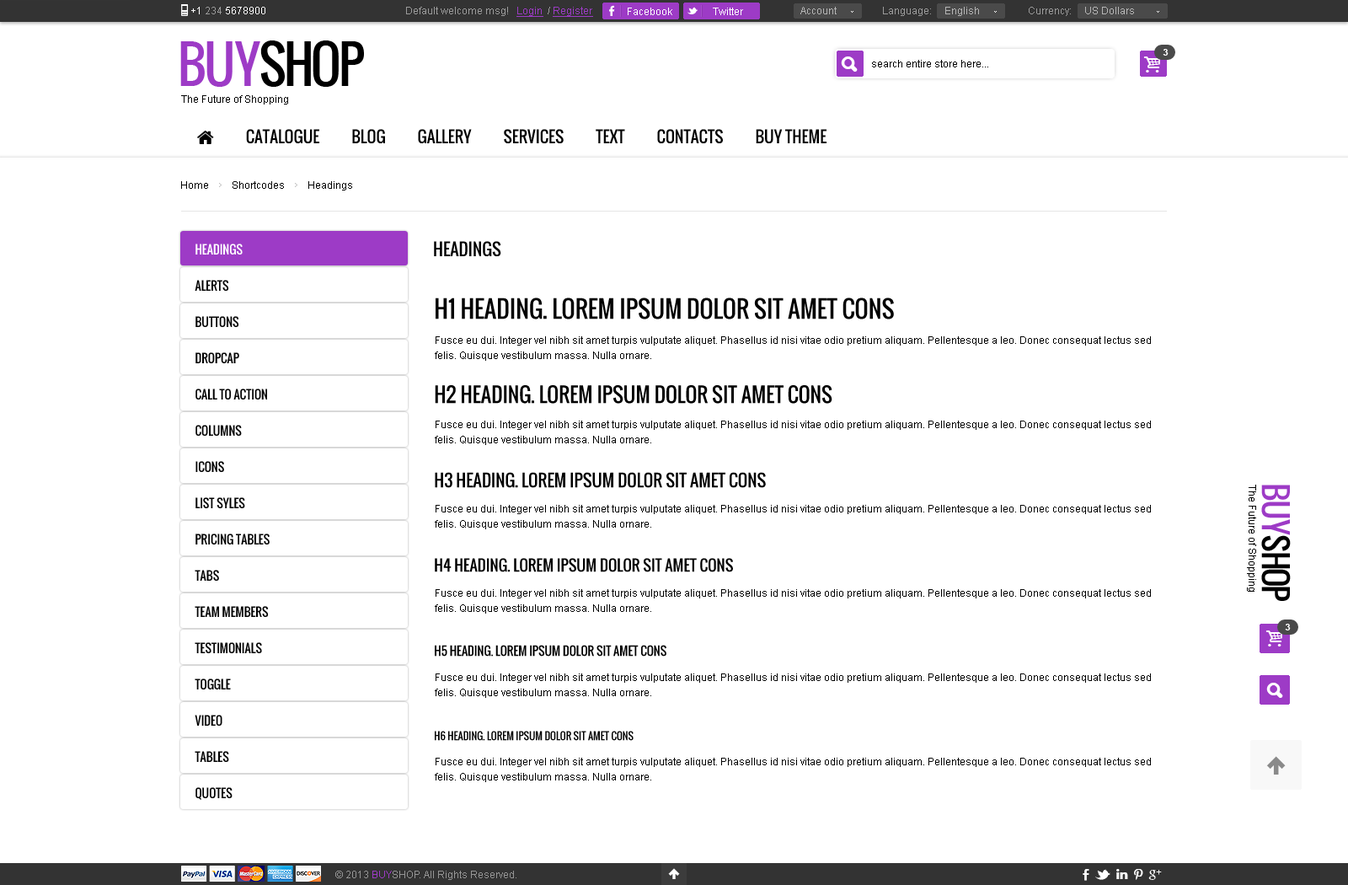
<style>
.page{position:relative;width:1348px;height:885px;background:#ffffff}
.page>*{position:absolute;margin:0}
.t1{font:10.1px "ArialMT";color:#ffffff}
.t2{font:10.1px "ArialMT";color:#9b9b9b}
.t3{font:10.1px "ArialMT";color:#9d3bc6;text-decoration:underline}
.t4{font:10.1px "ArialMT";color:#b6b6b6}
.t5{font:50.5px "Oswald";letter-spacing:-0.06em;color:#000000;text-transform:uppercase}
.t6{font:50.5px "Oswald";letter-spacing:-0.06em;color:#9d3bc6;text-transform:uppercase}
.t7{font:9.3px "Arial-BoldMT";color:#ffffff;text-transform:uppercase}
.t8{font:10.1px "ArialMT";color:#000000}
.t9{font:11.8px/36.2px "Oswald";color:#000000;text-transform:uppercase}
.t10{font:11.8px/36.2px "Oswald";color:#ffffff;text-transform:uppercase}
.t11{font:16.8px "Oswald";color:#000000;text-transform:uppercase}
.t12{font:23.6px/84.2px "Oswald";color:#000000;text-transform:uppercase}
.t13{font:20.2px/84.2px "Oswald";color:#000000;text-transform:uppercase}
.t14{font:16.8px/84.2px "Oswald";color:#000000;text-transform:uppercase}
.t15{font:15.2px/84.2px "Oswald";color:#000000;text-transform:uppercase}
.t16{font:11.8px/84.2px "Oswald";color:#000000;text-transform:uppercase}
.t17{font:10.1px/84.2px "Oswald";color:#000000;text-transform:uppercase}
.t18{font:10.1px/15.2px "ArialMT";color:#000000}
.t19{font:32px "Oswald";letter-spacing:-0.06em;color:#000000;text-transform:uppercase}
.t20{font:32px "Oswald";letter-spacing:-0.06em;color:#9d3bc6;text-transform:uppercase}
.t21{font:10.1px "ArialMT";color:#959595}
.t22{font:10.1px "ArialMT";color:#9d3bc6}
</style>
<div class="page">
<p class="t1" style="left:191px;top:7px;width:74px;height:7px">+1 <span class="t2">234 </span>5678900</p>
<p class="t2" style="left:406px;top:7px;width:187px;height:10px">Default welcome msg!   <span class="t3">Login </span> / <span class="t3">Register</span></p>
<p class="t2" style="left:406px;top:7px;width:187px;height:10px">Default welcome msg!   <span class="t3">Login </span> / <span class="t3">Register</span></p>
<p class="t1" style="left:628px;top:8px;width:44px;height:7px">Facebook</p>
<p class="t1" style="left:713px;top:8px;width:30px;height:7px">Twitter</p>
<p class="t4" style="left:800px;top:7px;width:37px;height:7px">Account</p>
<p class="t2" style="left:883px;top:7px;width:96px;height:9px">Language:     <span class="t4">English</span></p>
<p class="t4" style="left:1029px;top:7px;width:105px;height:9px"><span class="t2">Currency:     </span>US Dollars</p>
<p class="t5" style="left:180px;top:40px;width:184px;height:47px"><span class="t6">buy</span>shop</p>
<p class="t7" style="left:1163px;top:49px;width:6px;height:7px">3</p>
<p class="t8" style="left:872px;top:60px;width:116px;height:7px">search entire store here...</p>
<p class="t8" style="left:181px;top:95px;width:107px;height:9px">The Future of Shopping</p>
<p class="t8" style="left:181px;top:181px;width:171px;height:9px">Home         Shortcodes         Headings</p>
<p class="t9" style="left:195px;top:243px;width:75px;height:557px"><span class="t10">Headings</span><br>Alerts<br>Buttons<br>Dropcap<br>Call To Action<br>Columns<br>Icons<br>List syles<br>Pricing Tables<br>Tabs<br>Team Members<br>Testimonials<br>Toggle<br>Video<br>Tables<br>Quotes</p>
<p class="t11" style="left:434px;top:241px;width:67px;height:16px">HEADINGS</p>
<p class="t12" style="left:435px;top:297px;width:459px;height:444px">H1 Heading. Lorem ipsum dolor sit amet cons<br><span class="t13">H2 Heading. Lorem ipsum dolor sit amet cons<br></span><span class="t14">H3 Heading. Lorem ipsum dolor sit amet cons<br></span><span class="t15">H4 Heading. Lorem ipsum dolor sit amet cons<br></span><span class="t16">H5 Heading. Lorem ipsum dolor sit amet cons<br></span><span class="t17">H6 Heading. Lorem ipsum dolor sit amet cons</span></p>
<p class="t18" style="left:435px;top:336px;width:716px;height:25px">Fusce eu dui. Integer vel nibh sit amet turpis vulputate aliquet. Phasellus id nisi vitae odio pretium aliquam. Pellentesque a leo. Donec consequat lectus sed felis. Quisque vestibulum massa. Nulla ornare.</p>
<p class="t18" style="left:435px;top:420px;width:716px;height:25px">Fusce eu dui. Integer vel nibh sit amet turpis vulputate aliquet. Phasellus id nisi vitae odio pretium aliquam. Pellentesque a leo. Donec consequat lectus sed felis. Quisque vestibulum massa. Nulla ornare.</p>
<p class="t8" style="left:1247px;top:484px;width:9px;height:107px;rotate:90deg">The Future of Shopping</p>
<p class="t19" style="left:1261px;top:484px;width:30px;height:117px;rotate:90deg"><span class="t20">buy</span>shop</p>
<p class="t18" style="left:435px;top:505px;width:716px;height:24px">Fusce eu dui. Integer vel nibh sit amet turpis vulputate aliquet. Phasellus id nisi vitae odio pretium aliquam. Pellentesque a leo. Donec consequat lectus sed felis. Quisque vestibulum massa. Nulla ornare.</p>
<p class="t18" style="left:435px;top:589px;width:716px;height:24px">Fusce eu dui. Integer vel nibh sit amet turpis vulputate aliquet. Phasellus id nisi vitae odio pretium aliquam. Pellentesque a leo. Donec consequat lectus sed felis. Quisque vestibulum massa. Nulla ornare.</p>
<p class="t7" style="left:1285px;top:623px;width:6px;height:7px">3</p>
<p class="t18" style="left:435px;top:673px;width:716px;height:25px">Fusce eu dui. Integer vel nibh sit amet turpis vulputate aliquet. Phasellus id nisi vitae odio pretium aliquam. Pellentesque a leo. Donec consequat lectus sed felis. Quisque vestibulum massa. Nulla ornare.</p>
<p class="t18" style="left:435px;top:757px;width:716px;height:25px">Fusce eu dui. Integer vel nibh sit amet turpis vulputate aliquet. Phasellus id nisi vitae odio pretium aliquam. Pellentesque a leo. Donec consequat lectus sed felis. Quisque vestibulum massa. Nulla ornare.</p>
<p class="t21" style="left:335px;top:870px;width:181px;height:10px">© 2013 <span class="t22">BUY</span>SHOP. All Rights Reserved.</p>
</div>
